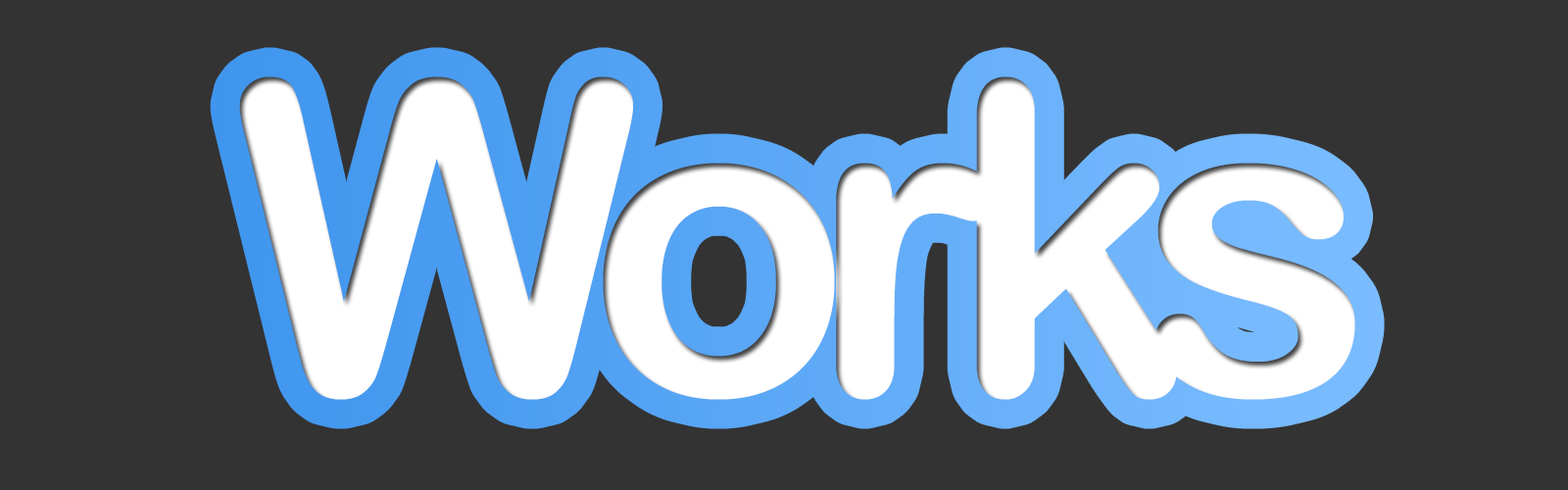
<style>
.page{position:relative;width:1568px;height:490px;background:#333333}
.page>*{position:absolute;margin:0}
.t1{font:435.6px "ArialRoundedMTBold";letter-spacing:-0.1em;color:#ffffff}
</style>
<div class="page">
<p class="t1" style="left:239px;top:76px;width:1116px;height:324px">Works</p>
</div>
